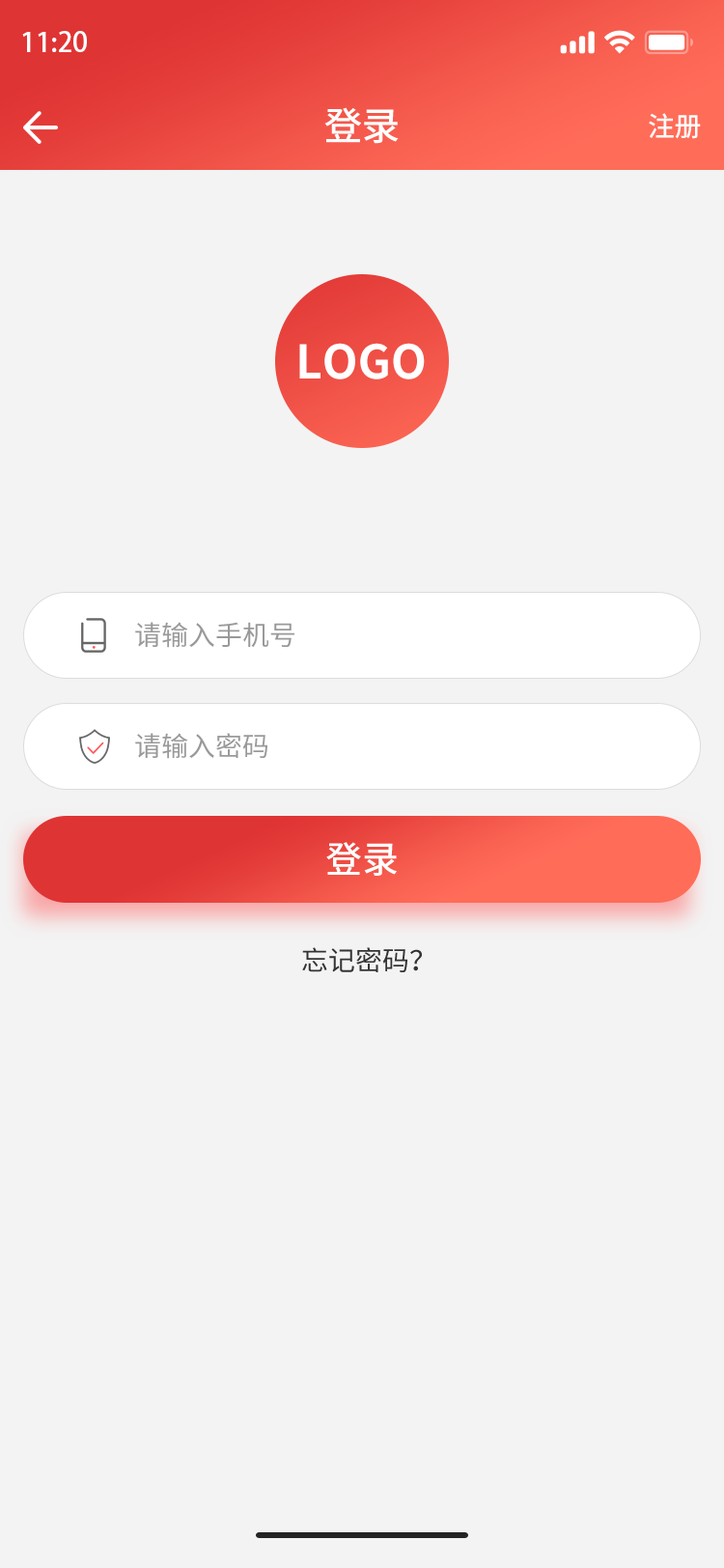
<style>
.page{position:relative;width:724px;height:1568px;background:#f3f3f3}
.page>*{position:absolute;margin:0}
.t1{font:27px "AdobeHeitiStd-Regular";color:#fefefe}
.t2{font:38.6px "SourceHanSansCN-Medium";letter-spacing:-0.02em;color:#ffffff}
.t3{font:27px "SourceHanSansCN-Medium";letter-spacing:-0.02em;color:#ffffff}
.t4{font:46.3px "SourceHanSansCN-Bold";color:#ffffff}
.t5{font:27px "SourceHanSansCN-Regular";color:#999999}
.t6{font:36.7px "SourceHanSansCN-Medium";color:#ffffff}
.t7{font:27px "SourceHanSansCN-Regular";color:#333333}
</style>
<div class="page">
<p class="t1" style="left:22px;top:31px;width:65px;height:21px">11:20</p>
<p class="t2" style="left:324px;top:107px;width:75px;height:37px">登录</p>
<p class="t3" style="left:649px;top:113px;width:52px;height:26px">注册</p>
<p class="t4" style="left:299px;top:343px;width:126px;height:36px">LOGO</p>
<p class="t5" style="left:135px;top:622px;width:159px;height:26px">请输入手机号</p>
<p class="t5" style="left:135px;top:733px;width:132px;height:26px">请输入密码</p>
<p class="t6" style="left:326px;top:842px;width:71px;height:34px">登录</p>
<p class="t7" style="left:302px;top:947px;width:120px;height:25px">忘记密码？</p>
</div>
